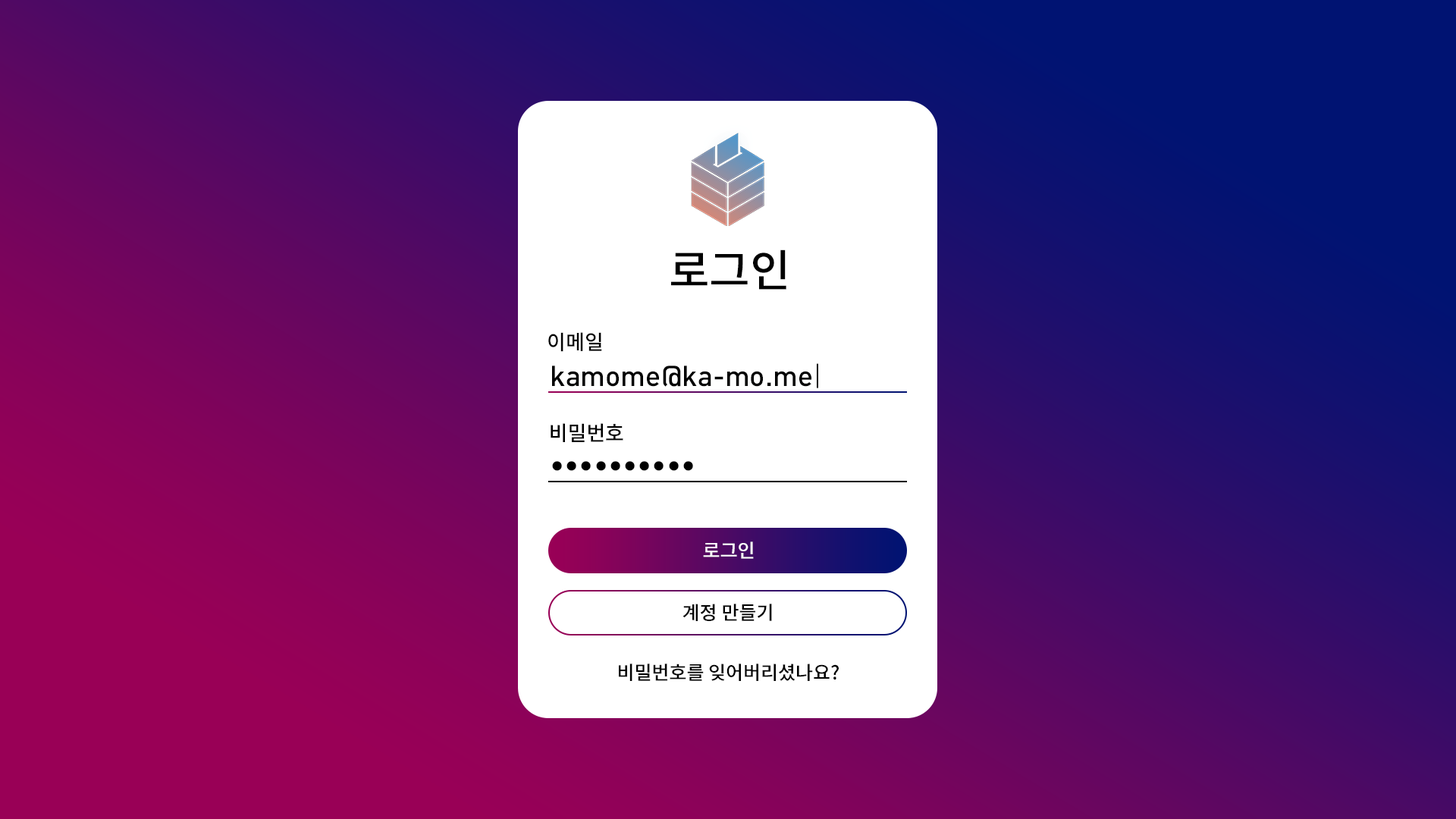
<style>
.page{position:relative;width:1456px;height:819px}
.page>*{position:absolute;margin:0}
.t1{font:44.2px "NotoSansCJKkr-Medium";color:#000000}
.t2{font:20.5px "NotoSansCJKkr-Medium";color:#000000}
.t3{font:28.4px "DIN-Medium";color:#000000}
.t4{font:28.4px "DIN-Light";color:#000000}
.t5{font:19px "NotoSansCJKkr-Medium";color:#ffffff}
.t6{font:19px "NotoSansCJKkr-Medium";color:#000000}
</style>
<div class="page">
<p class="t1" style="left:671px;top:249px;width:115px;height:41px">로그인</p>
<p class="t2" style="left:548px;top:332px;width:54px;height:20px">이메일</p>
<p class="t3" style="left:552px;top:363px;width:266px;height:25px">kamome@ka-mo.me<span class="t4">|</span></p>
<p class="t2" style="left:551px;top:423px;width:72px;height:19px">비밀번호</p>
<p class="t3" style="left:552px;top:461px;width:141px;height:10px">••••••••••</p>
<p class="t5" style="left:703px;top:541px;width:51px;height:18px">로그인</p>
<p class="t6" style="left:682px;top:604px;width:90px;height:17px">계정 만들기</p>
<p class="t6" style="left:619px;top:664px;width:220px;height:17px">비밀번호를 잊어버리셨나요?</p>
</div>
